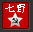
<style>
.page{position:relative;width:33px;height:32px;background:#c50000}
.page>*{position:absolute;margin:0}
.t1{font:10.4px "SimSun";color:#ffffff}
</style>
<div class="page">
<p class="t1" style="left:5px;top:4px;width:20px;height:9px">七野</p>
</div>
